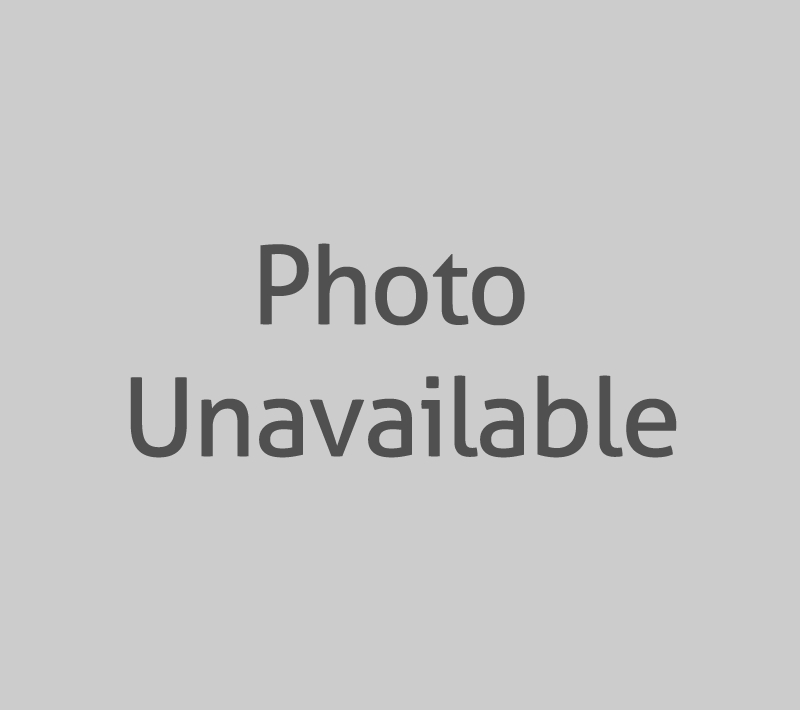
<style>
.page{position:relative;width:800px;height:710px;background:#cccccc}
.page>*{position:absolute;margin:0}
.t1{font:109.4px "Aller";letter-spacing:-0.025em;color:#505050}
</style>
<div class="page">
<p class="t1" style="left:130px;top:243px;width:547px;height:215px;text-align:center">Photo <br>Unavailable</p>
</div>
